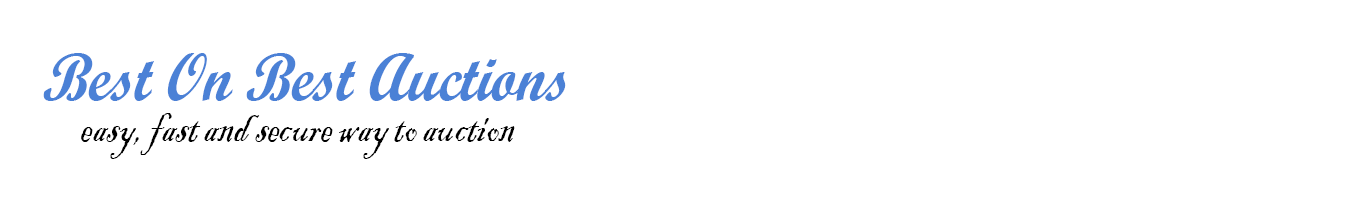
<style>
.page{position:relative;width:1366px;height:200px;background:#ffffff}
.page>*{position:absolute;margin:0}
.t1{font:66.6px "ScriptMTBold";color:#4b81d6;font-style:italic;scale:0.89 1}
.t2{font:48.8px "BlackadderITC-Regular";color:#000000;font-style:italic;scale:0.79 1}
</style>
<div class="page">
<p class="t1" style="left:43px;top:53px;width:523px;height:48px">Best On Best Auctions</p>
<p class="t2" style="left:81px;top:113px;width:434px;height:46px">easy, fast and secure way to auction</p>
</div>
